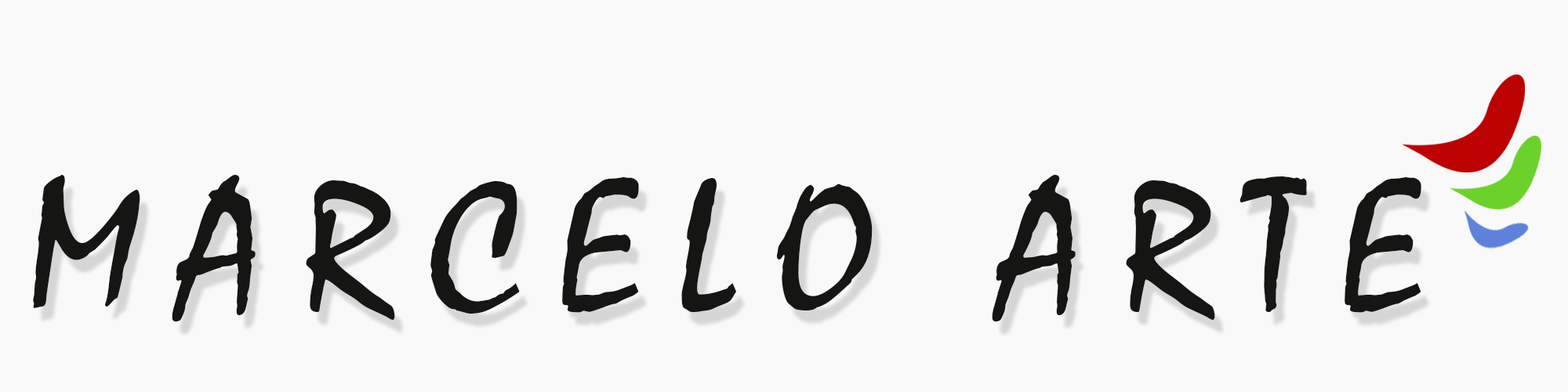
<style>
.page{position:relative;width:1568px;height:392px;background:#f9f9f9}
.page>*{position:absolute;margin:0}
.t1{font:190.7px "Mistral";letter-spacing:0.2em;color:#151614;text-transform:uppercase}
</style>
<div class="page">
<p class="t1" style="left:33px;top:174px;width:1388px;height:147px">Marcelo Arte</p>
</div>
